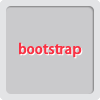
<style>
.page{position:relative;width:100px;height:100px;background:#cacacc}
.page>*{position:absolute;margin:0}
.t1{font:14px "AdobeHeitiStd-Regular";font-weight:bold}
.t2{font:14px "AdobeHeitiStd-Regular";color:#f93245;font-weight:bold}
</style>
<div class="page">
<p class="t1" style="left:18px;top:43px;width:66px;height:15px">JavaScript</p>
<p class="t1" style="left:19px;top:44px;width:66px;height:15px">JavaScript</p>
<p class="t2" style="left:19px;top:42px;width:63px;height:16px">bootstrap</p>
<p class="t1" style="left:20px;top:43px;width:63px;height:16px">bootstrap</p>
</div>
